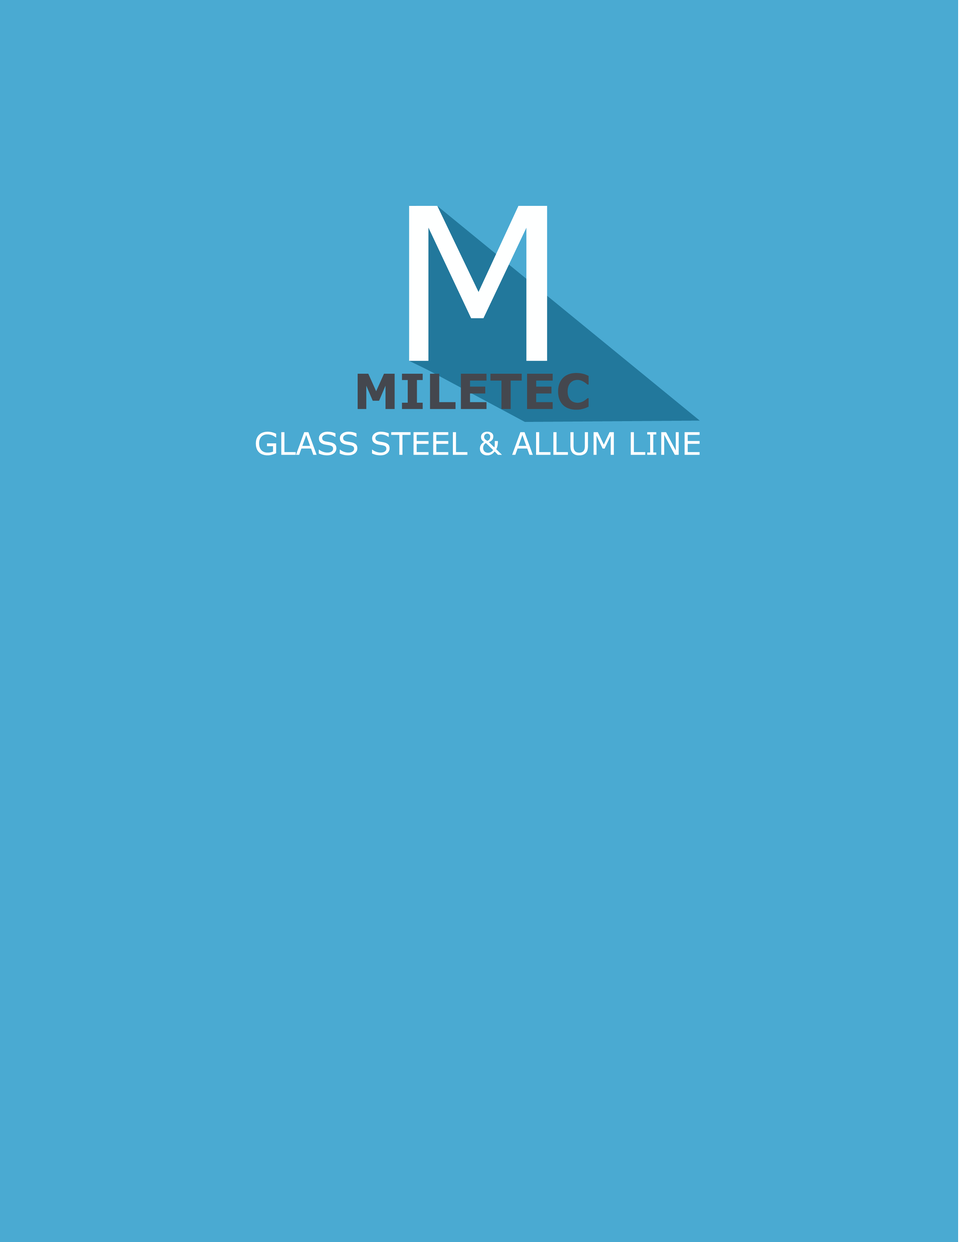
<style>
.page{position:relative;width:960px;height:1242px;background:#4aaad2}
.page>*{position:absolute;margin:0}
.t1{font:213px "Verdana";color:#feffff}
.t2{font:48.5px "Verdana-Bold";color:#44474e}
.t3{font:31.2px "Verdana";color:#ffffff}
</style>
<div class="page">
<p class="t1" style="left:409px;top:206px;width:138px;height:155px">M</p>
<p class="t2" style="left:358px;top:373px;width:231px;height:37px">MILETEC</p>
<p class="t3" style="left:256px;top:432px;width:444px;height:23px">GLASS STEEL &amp; ALLUM LINE</p>
</div>
